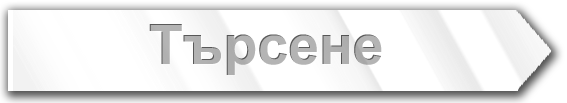
<style>
.page{position:relative;width:567px;height:103px;background:#ffffff}
.page>*{position:absolute;margin:0}
.t1{font:55.6px "Arial-BoldMT";color:#b2b2b2}
</style>
<div class="page">
<p class="t1" style="left:149px;top:24px;width:233px;height:51px">Търсене</p>
</div>
